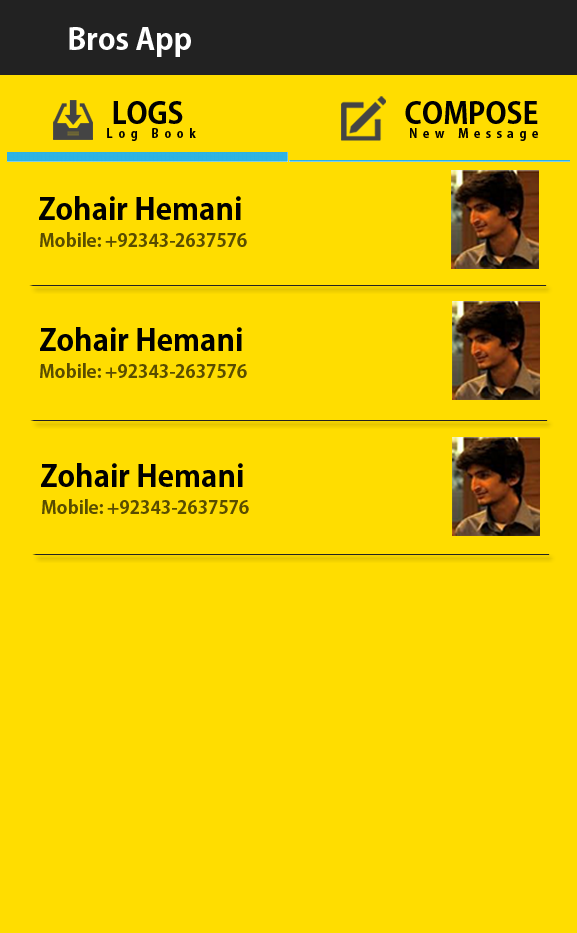
<style>
.page{position:relative;width:577px;height:933px;background:#ffdd00}
.page>*{position:absolute;margin:0}
.t1{font:30px "AdobeGothicStd-Bold";color:#ffffff}
.t2{font:29px "AdobeGothicStd-Bold";color:#000000}
.t3{font:12px "AdobeGothicStd-Bold";letter-spacing:0.45em;color:#000000}
.t4{font:30px "AdobeGothicStd-Bold";color:#000000}
.t5{font:18px "AdobeGothicStd-Bold";color:#594d00}
</style>
<div class="page">
<p class="t1" style="left:69px;top:27px;width:122px;height:30px">Bros App</p>
<p class="t2" style="left:113px;top:101px;width:70px;height:23px">LOGS</p>
<p class="t2" style="left:405px;top:101px;width:133px;height:23px">COMPOSE</p>
<p class="t3" style="left:107px;top:128px;width:89px;height:13px">Log Book</p>
<p class="t3" style="left:410px;top:128px;width:128px;height:13px">New Message</p>
<p class="t4" style="left:39px;top:196px;width:202px;height:24px">Zohair Hemani</p>
<p class="t5" style="left:40px;top:232px;width:207px;height:15px">Mobile: +92343-2637576</p>
<p class="t4" style="left:40px;top:327px;width:202px;height:24px">Zohair Hemani</p>
<p class="t5" style="left:40px;top:363px;width:207px;height:15px">Mobile: +92343-2637576</p>
<p class="t4" style="left:41px;top:463px;width:202px;height:24px">Zohair Hemani</p>
<p class="t5" style="left:42px;top:499px;width:207px;height:15px">Mobile: +92343-2637576</p>
</div>
